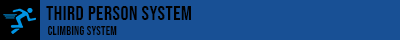
<style>
.page{position:relative;width:400px;height:40px;background:#185095}
.page>*{position:absolute;margin:0}
.t1{font:20px "BebasNeue-Regular";letter-spacing:0.025em;color:#000000}
.t2{font:12px "BebasNeue-Regular";letter-spacing:0.025em;color:#000000}
</style>
<div class="page">
<p class="t1" style="left:46px;top:6px;width:145px;height:14px">THIRD PERSON SYSTEM</p>
<p class="t2" style="left:48px;top:26px;width:69px;height:9px">Climbing System</p>
</div>
